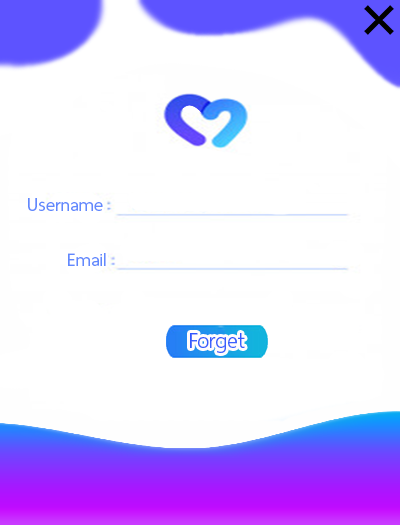
<style>
.page{position:relative;width:400px;height:525px;background:#ffffff}
.page>*{position:absolute;margin:0}
.t1{font:25px "ThaiSansNeue-Regular";color:#6289fd}
.t2{font:29.2px "ThaiSansNeue-Regular";color:#375efd}
</style>
<div class="page">
<p class="t1" style="left:28px;top:198px;width:75px;height:13px">Username</p>
<p class="t1" style="left:68px;top:253px;width:38px;height:13px">Email</p>
<p class="t2" style="left:190px;top:333px;width:55px;height:20px">Forget</p>
</div>
